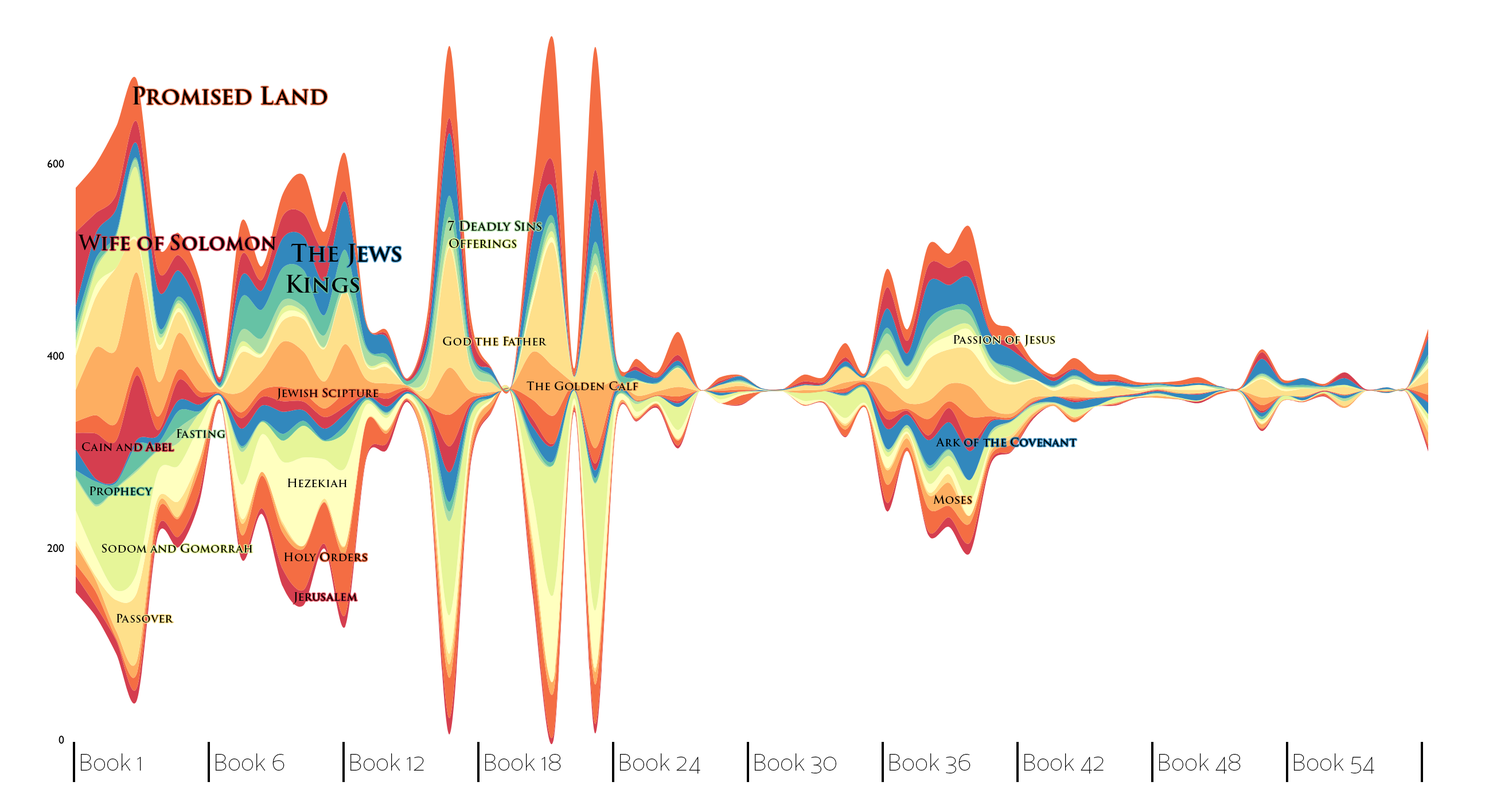
<style>
.page{position:relative;width:1489px;height:801px;background:#ffffff}
.page>*{position:absolute;margin:0}
.t1{font:22.9px "TrajanPro3-Semibold";color:#000000}
.t2{font:12.6px "TrajanPro3-Semibold";color:#000000}
.t3{font:20.1px "TrajanPro3-Semibold";color:#000000}
.t4{font:12px "TrajanPro3-Semibold";color:#000000}
.t5{font:11.5px "TrajanPro3-Semibold";color:#000000}
</style>
<div class="page">
<p class="t1" style="left:133px;top:87px;width:194px;height:17px">Promised Land</p>
<p class="t2" style="left:448px;top:221px;width:93px;height:10px">7 Deadly Sins</p>
<p class="t3" style="left:78px;top:235px;width:198px;height:15px">Wife of Solomon</p>
<p class="t1" style="left:291px;top:243px;width:110px;height:24px">The Jews</p>
<p class="t4" style="left:449px;top:239px;width:67px;height:9px">Offerings</p>
<p class="t1" style="left:286px;top:275px;width:73px;height:18px">Kings</p>
<p class="t5" style="left:443px;top:337px;width:104px;height:8px">God the Father</p>
<p class="t5" style="left:953px;top:335px;width:102px;height:12px">Passion of Jesus</p>
<p class="t5" style="left:276px;top:388px;width:103px;height:12px">Jewish Scipture</p>
<p class="t5" style="left:527px;top:381px;width:111px;height:9px">The Golden Calf</p>
<p class="t5" style="left:176px;top:429px;width:49px;height:9px">Fasting</p>
<p class="t5" style="left:936px;top:437px;width:141px;height:9px">Ark of the Covenant</p>
<p class="t5" style="left:82px;top:442px;width:92px;height:9px">Cain and Abel</p>
<p class="t5" style="left:287px;top:478px;width:61px;height:9px">Hezekiah</p>
<p class="t5" style="left:89px;top:486px;width:64px;height:9px">Prophecy</p>
<p class="t5" style="left:933px;top:494px;width:39px;height:10px">Moses</p>
<p class="t5" style="left:102px;top:544px;width:151px;height:8px">Sodom and Gomorrah</p>
<p class="t5" style="left:284px;top:552px;width:83px;height:9px">Holy Orders</p>
<p class="t5" style="left:293px;top:592px;width:64px;height:12px">Jerusalem</p>
<p class="t5" style="left:116px;top:614px;width:58px;height:8px">Passover</p>
</div>
